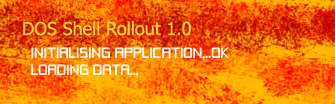
<style>
.page{position:relative;width:335px;height:104px}
.page>*{position:absolute;margin:0}
.t1{font:18px "Tahoma";color:#ffd52f}
.t2{font:14px "ZeroThrees";color:#ffffff}
</style>
<div class="page">
<p class="t1" style="left:23px;top:21px;width:168px;height:15px">DOS Shell Rollout 1.0</p>
<p class="t2" style="left:31px;top:47px;width:198px;height:29px">INITIALISING APPLICATION...OK<br>LOADING DATA...</p>
</div>
